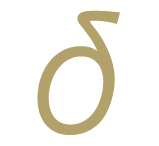
<style>
.page{position:relative;width:159px;height:146px;background:#ffffff}
.page>*{position:absolute;margin:0}
.t1{font:158px "HiraginoSansGB-W3";letter-spacing:-0.055em;color:#b3a16c;scale:0.9 1}
</style>
<div class="page">
<p class="t1" style="left:37px;top:10px;width:83px;height:125px">δ</p>
</div>
